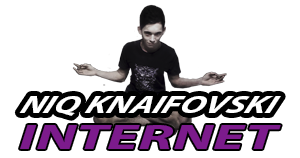
<style>
.page{position:relative;width:300px;height:158px;background:#ffffff}
.page>*{position:absolute;margin:0}
.t1{font:27.1px "MyriadPro-BoldIt";color:#ffffff;scale:1.32 1}
.t2{font:34.9px "MyriadPro-BoldIt";color:#7c1b8c;scale:1.72 1}
</style>
<div class="page">
<p class="t1" style="left:19px;top:96px;width:262px;height:20px">NIQ KNAIFOVSKI</p>
<p class="t2" style="left:20px;top:125px;width:261px;height:24px">INTERNET</p>
</div>
